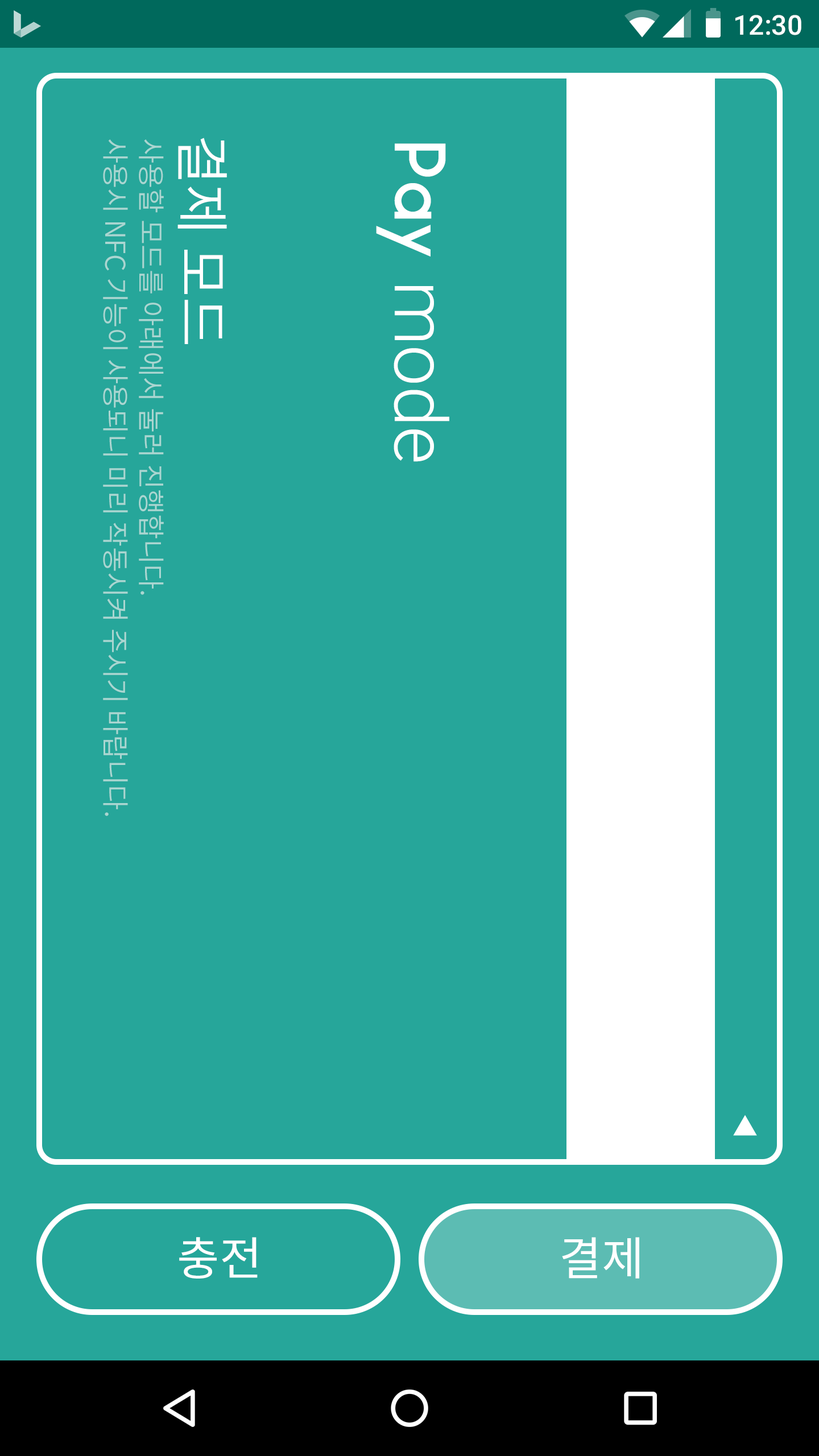
<style>
.page{position:relative;width:819px;height:1456px;background:#26a69a}
.page>*{position:absolute;margin:0}
.t1{font:27.3px "Roboto-Medium";color:#ffffff}
.t2{font:54.6px "NotoSansCJKkr-DemiLight";color:#ffffff}
.t3{font:27.3px "NotoSansCJKkr-DemiLight";color:#aad6d1}
.t4{font:72.8px "Roboto-Light";color:#ffffff}
.t5{font:72.8px "Ikaros";color:#ffffff}
.t6{font:46.1px "NotoSansCJKkr-Regular";color:#ffffff}
</style>
<div class="page">
<p class="t1" style="left:735px;top:15px;width:66px;height:20px">12:30</p>
<p class="t2" style="left:177px;top:138px;width:50px;height:206px;rotate:90deg">결제 모드</p>
<p class="t3" style="left:103px;top:139px;width:25px;height:677px;rotate:90deg">사용시 NFC 기능이 사용되니 미리 작동시켜 주시기 바랍니다.</p>
<p class="t3" style="left:139px;top:139px;width:25px;height:456px;rotate:90deg">사용할 모드를 아래에서 눌러 진행합니다.</p>
<p class="t4" style="left:376px;top:143px;width:73px;height:319px;rotate:90deg"><span class="t5">Pay </span>mode</p>
<p class="t6" style="left:179px;top:1237px;width:79px;height:42px">충전</p>
<p class="t6" style="left:562px;top:1237px;width:77px;height:42px">결제</p>
</div>
